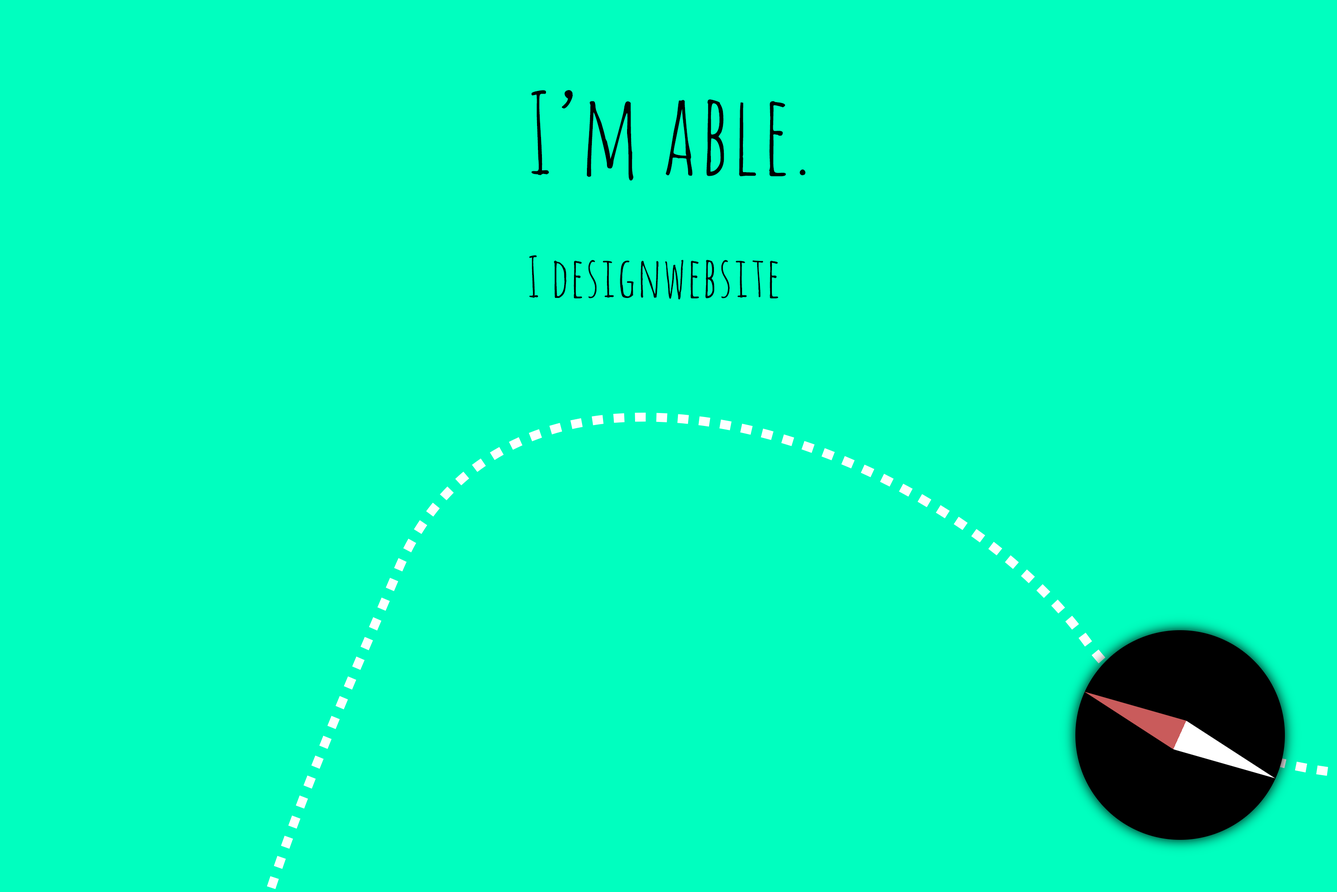
<style>
.page{position:relative;width:1337px;height:892px;background:#00ffbf}
.page>*{position:absolute;margin:0}
.t1{font:111.5px "AmaticSC-Regular";letter-spacing:0.03em;color:#000000}
.t2{font:55.7px "AmaticSC-Regular";letter-spacing:0.03em;color:#000000}
</style>
<div class="page">
<p class="t1" style="left:531px;top:90px;width:275px;height:91px">I’m able.</p>
<p class="t2" style="left:529px;top:255px;width:249px;height:45px">I designwebsite</p>
</div>
